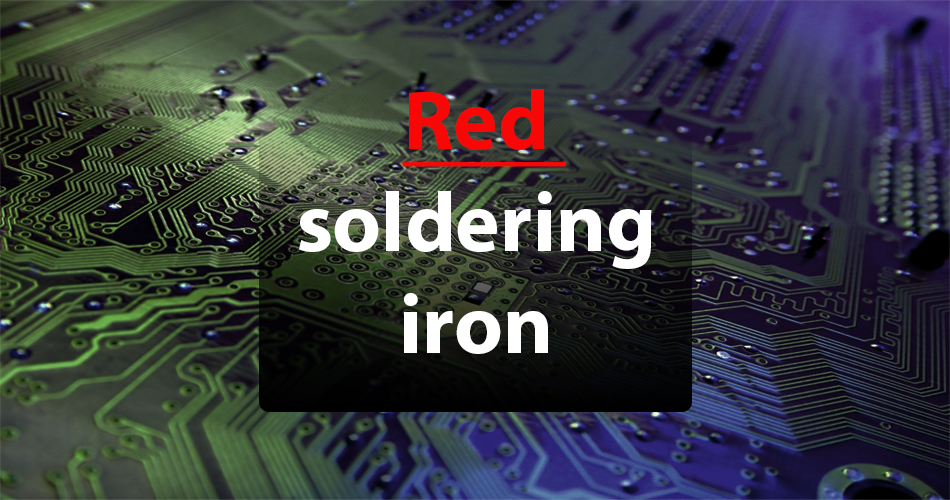
<style>
.page{position:relative;width:950px;height:500px}
.page>*{position:absolute;margin:0}
.t1{font:85px "MyriadPro-Bold";color:#ffffff}
.t2{font:85px "MyriadPro-Bold";color:#f90606;text-decoration:underline}
</style>
<div class="page">
<p class="t1" style="left:299px;top:89px;width:353px;height:265px;text-align:center"><span class="t2">Red <br></span>soldering<br>iron</p>
</div>
